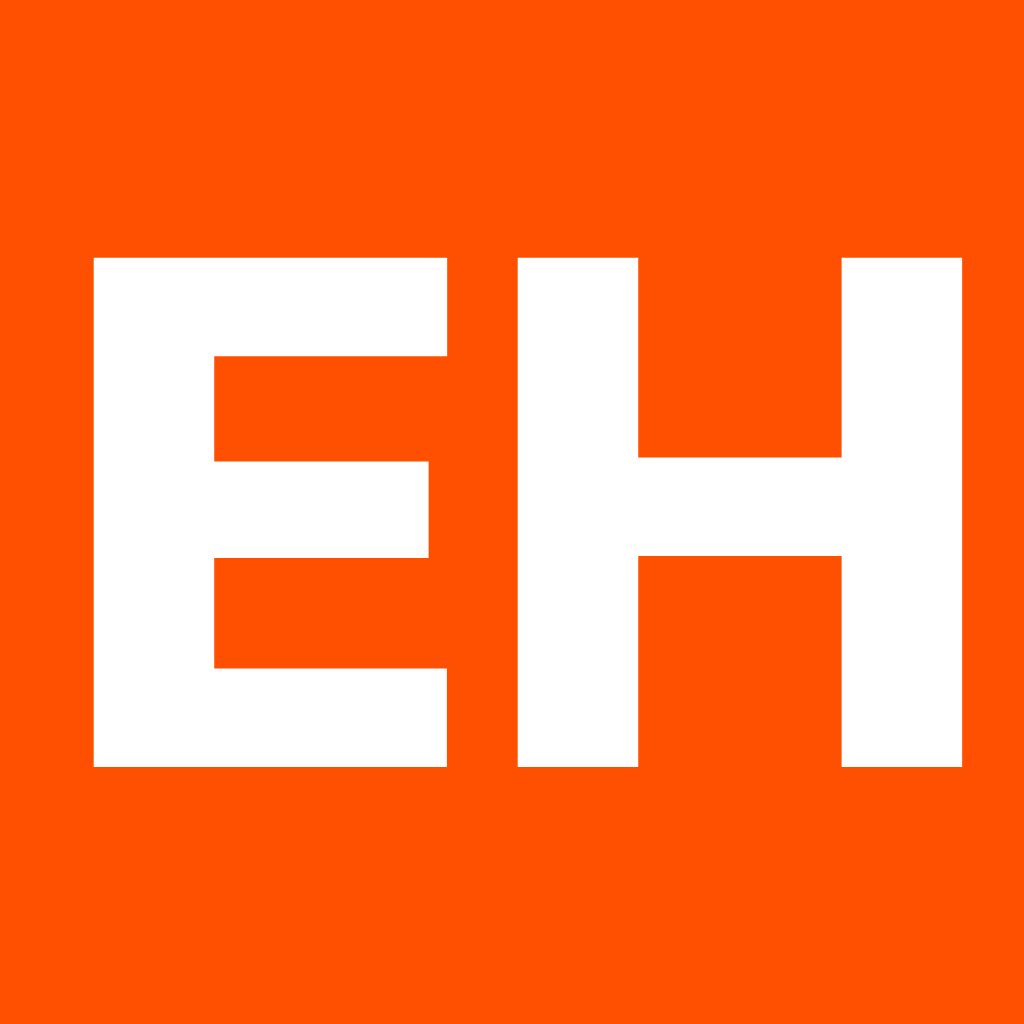
<style>
.page{position:relative;width:1024px;height:1024px;background:#ff4f00}
.page>*{position:absolute;margin:0}
.t1{font:700px "Inter-ExtraBold_14.000opsz_800.000wght";letter-spacing:-0.005em;color:#ffffff}
</style>
<div class="page">
<p class="t1" style="left:93px;top:257px;width:870px;height:510px">EH</p>
</div>
